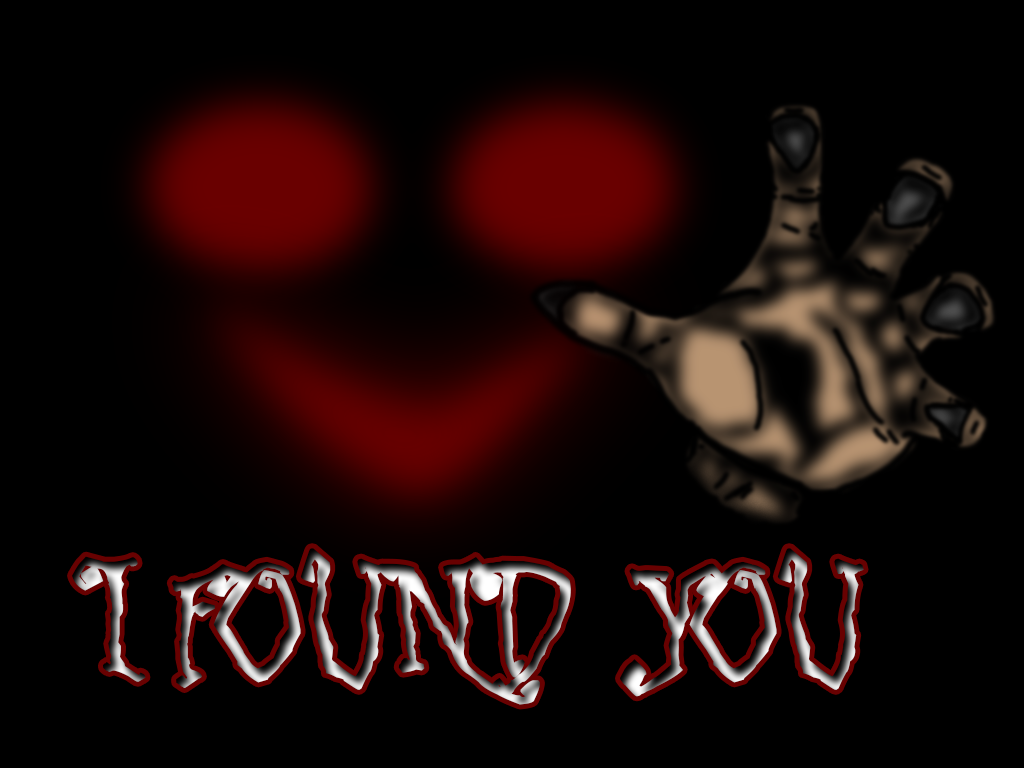
<style>
.page{position:relative;width:1024px;height:768px;background:#000000}
.page>*{position:absolute;margin:0}
.t1{font:152.8px "Latchboy";font-weight:bold}
</style>
<div class="page">
<p class="t1" style="left:72px;top:548px;width:792px;height:157px">I FOUND YOU</p>
</div>
